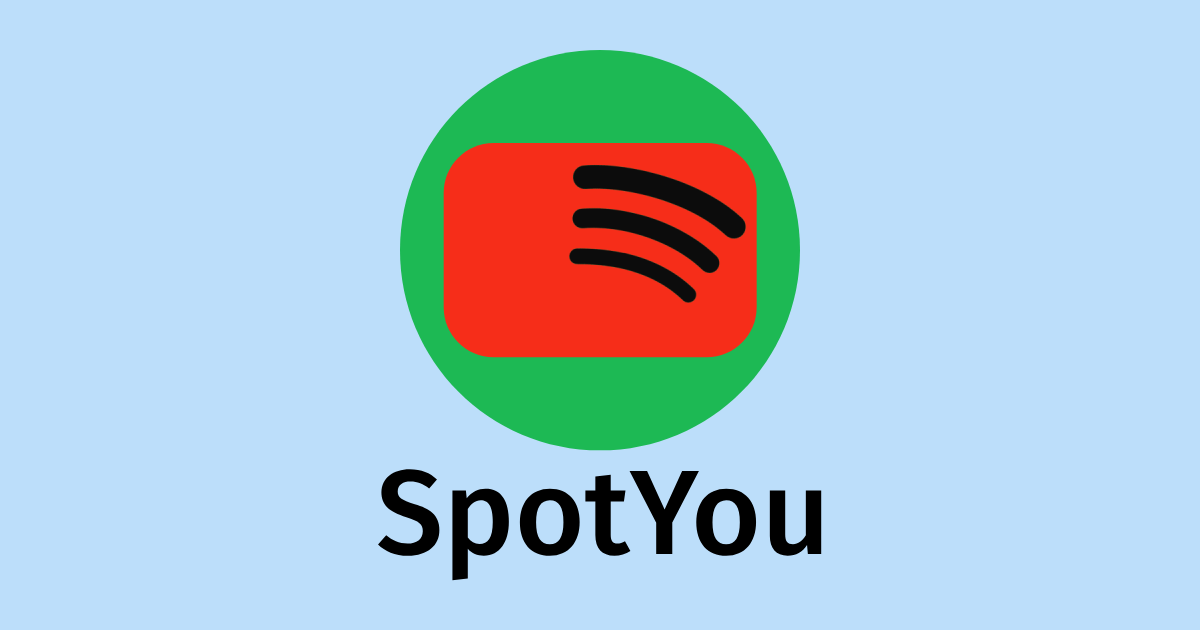
<style>
.page{position:relative;width:1200px;height:630px;background:#bcdefa}
.page>*{position:absolute;margin:0}
.t1{font:120px "FiraSans-Medium";color:#000000}
</style>
<div class="page">
<p class="t1" style="left:378px;top:469px;width:444px;height:112px">SpotYou</p>
</div>
